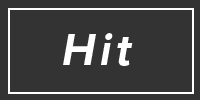
<style>
.page{position:relative;width:200px;height:100px;background:#333333}
.page>*{position:absolute;margin:0}
.t1{font:45.8px "ProximaNova-Bold";letter-spacing:0.1em;color:#ffffff;font-style:italic}
</style>
<div class="page">
<p class="t1" style="left:63px;top:33px;width:70px;height:33px">Hit</p>
</div>
